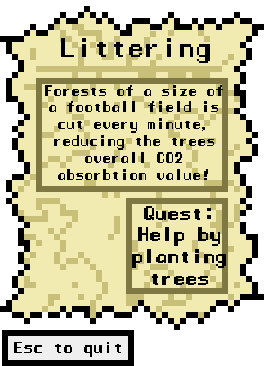
<style>
.page{position:relative;width:264px;height:366px;background:#f1ebb2}
.page>*{position:absolute;margin:0}
.t1{font:25px "ManaspaceReg";color:#000000}
.t2{font:14px "ManaspaceReg";color:#000000}
.t3{font:18px "ManaspaceReg";color:#000000}
</style>
<div class="page">
<p class="t1" style="left:61px;top:38px;width:149px;height:25px">Littering</p>
<p class="t2" style="left:45px;top:85px;width:178px;height:95px;text-align:center">Forests of a size of a football field is cut every minute, reducing the trees overall CO2 absorbtion value!</p>
<p class="t3" style="left:132px;top:206px;width:94px;height:79px;text-align:center">Quest:<br>Help by planting trees</p>
</div>
